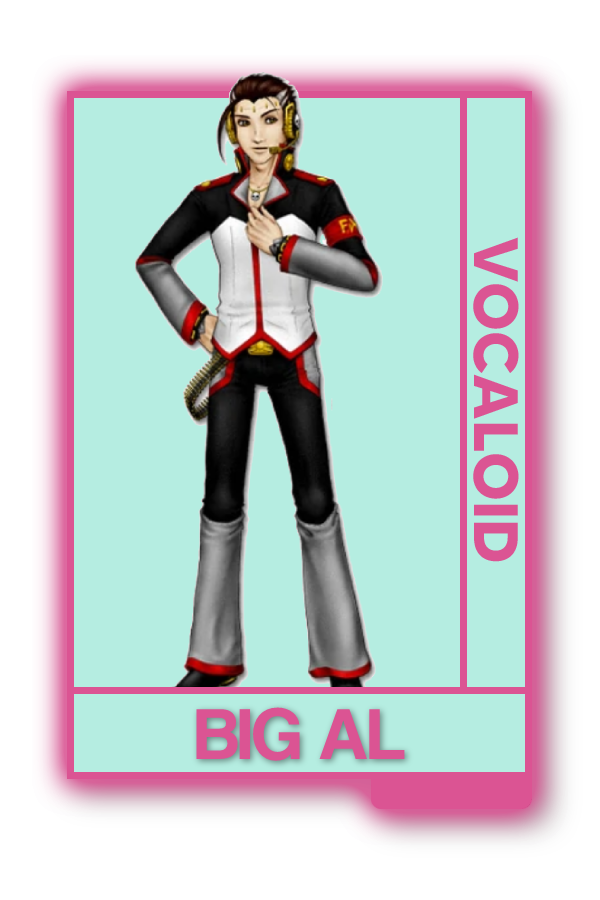
<style>
.page{position:relative;width:600px;height:900px;background:#b5ede1}
.page>*{position:absolute;margin:0}
.t1{font:62.5px "MADETOMMY-Bold";color:#db5493}
.t2{font:75px "CoolveticaRg-Regular";color:#db5493}
</style>
<div class="page">
<p class="t1" style="left:473px;top:237px;width:46px;height:325px;rotate:90deg">VOCALOID</p>
<p class="t2" style="left:196px;top:707px;width:209px;height:54px">BIG AL</p>
</div>
